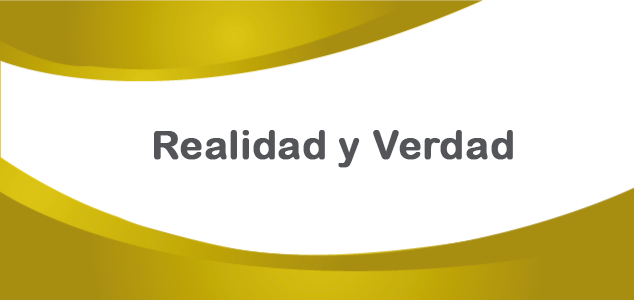
<style>
.page{position:relative;width:634px;height:300px;background:#ffffff}
.page>*{position:absolute;margin:0}
.t1{font:40px "ArialRoundedMTBold";color:#535558;font-weight:bold}
</style>
<div class="page">
<p class="t1" style="left:154px;top:130px;width:359px;height:38px">Realidad y Verdad</p>
</div>
